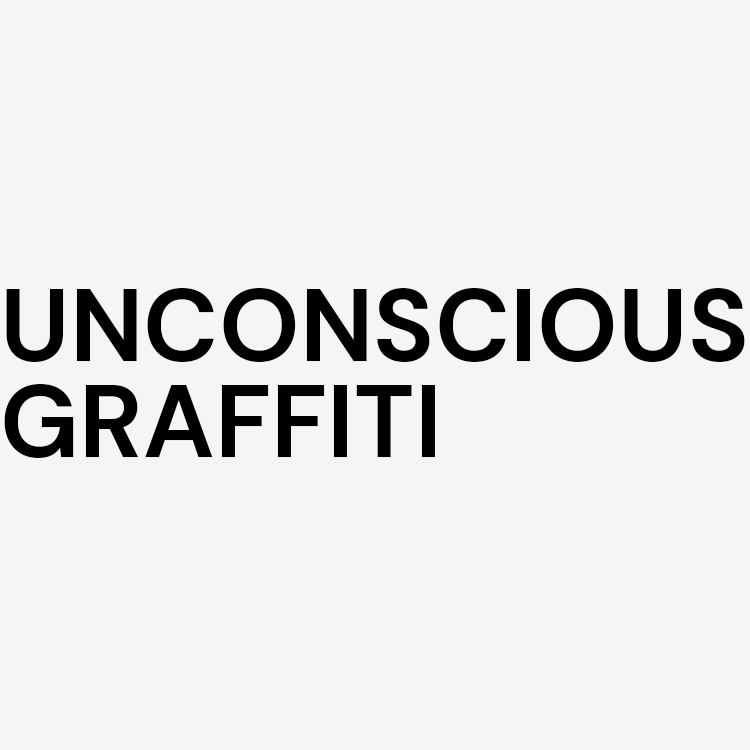
<style>
.page{position:relative;width:750px;height:750px;background:#f5f5f5}
.page>*{position:absolute;margin:0}
.t1{font:102.5px/95.6px "DMSans-Bold";color:#000000;text-transform:uppercase}
</style>
<div class="page">
<p class="t1" style="left:4px;top:288px;width:741px;height:170px">Unconscious <br>graffiti</p>
</div>
